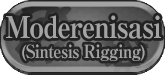
<style>
.page{position:relative;width:165px;height:75px}
.page>*{position:absolute;margin:0}
.t1{font:30px "RyuminPro-ExBold";letter-spacing:-0.04em;color:#a4a4a4;scale:0.9 1}
.t2{font:18px "RyuminPro-ExBold";letter-spacing:-0.04em;color:#a4a4a4;scale:0.9 1}
.t3{font:34px "RyuminPro-ExBold";letter-spacing:-0.04em;color:#a4a4a4;scale:0.9 1}
</style>
<div class="page">
<p class="t1" style="left:6px;top:15px;width:155px;height:24px">Moderenisasi</p>
<p class="t2" style="left:22px;top:44px;width:123px;height:17px"><span class="t3"><br></span>(Sintesis Rigging)</p>
</div>
